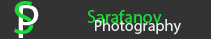
<style>
.page{position:relative;width:211px;height:39px;background:#333333}
.page>*{position:absolute;margin:0}
.t1{font:18px "MyriadPro-Regular";color:#18dc34}
.t2{font:16px "MyriadPro-Regular";color:#e8efe9}
</style>
<div class="page">
<p class="t1" style="left:87px;top:10px;width:75px;height:13px">Sarafanov</p>
<p class="t2" style="left:95px;top:19px;width:86px;height:16px">Photography</p>
</div>
